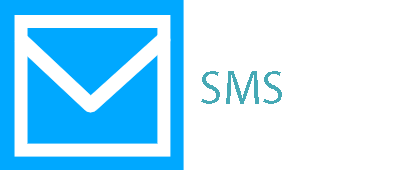
<style>
.page{position:relative;width:418px;height:170px;background:#ffffff}
.page>*{position:absolute;margin:0}
.t1{font:48px "MyriadPro-Regular";color:#46a9b5}
</style>
<div class="page">
<p class="t1" style="left:201px;top:71px;width:81px;height:33px">SMS</p>
</div>
